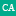
<style>
.page{position:relative;width:16px;height:16px;background:#00ac8c}
.page>*{position:absolute;margin:0}
.t1{font:9.3px "TimesNewRomanPSMT";letter-spacing:-0.025em;color:#ffffff}
</style>
<div class="page">
<p class="t1" style="left:2px;top:4px;width:13px;height:7px">CA</p>
</div>
